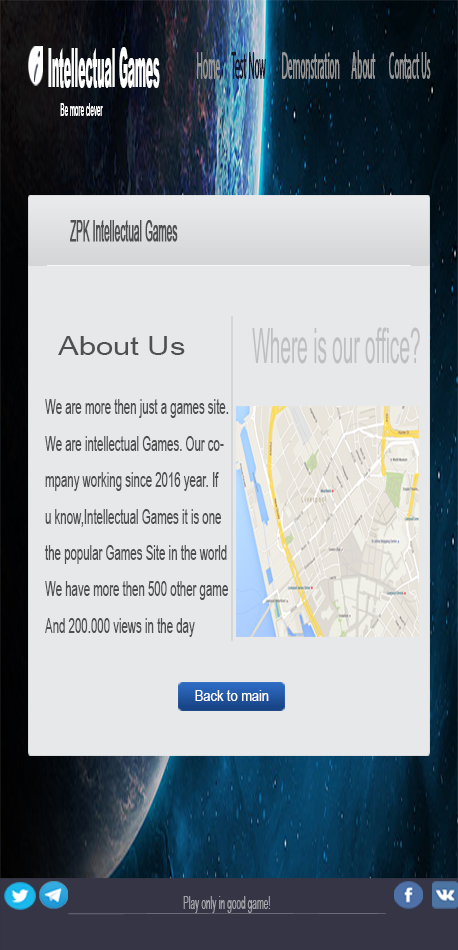
<style>
.page{position:relative;width:458px;height:950px;background:#e7e8ea}
.page>*{position:absolute;margin:0}
.t1{font:58.9px "FreeportPlain";color:#1f1f31;scale:0.39 1}
.t2{font:53.9px "Arial-Black";color:#ffffff;scale:0.2 1}
.t3{font:53.9px "MyriadPro-Regular";color:#ffffff;scale:0.2 1}
.t4{font:39.8px "MyriadPro-Regular";color:#979797;scale:0.23 1}
.t5{font:39.8px "MyriadPro-Regular";color:#161628;scale:0.23 1}
.t6{font:18.2px "ArialMT";color:#ffffff;scale:0.34 1}
.t7{font:29.8px "ArialNarrow";color:#505050;font-weight:bold;scale:0.39 1}
.t8{font:48.7px "ArialNarrow";color:#bfbfbf;scale:0.48 1}
.t9{font:26.1px "ArialNarrow";color:#505050;scale:1.44 1}
.t10{font:21.4px/18.2px "ArialNarrow";color:#505050;scale:0.65 1}
.t11{font:16.2px "ArialNarrow";color:#ffffff;scale:0.96 1}
.t12{font:18.2px "ArialNarrow";color:#a6a6ab;scale:0.55 1}
</style>
<div class="page">
<p class="t1" style="left:34px;top:51px;width:6px;height:31px">i</p>
<p class="t2" style="left:48px;top:47px;width:112px;height:41px"><span class="t3"> </span>Intellectual Games</p>
<p class="t4" style="left:197px;top:50px;width:234px;height:29px">Home     <span class="t5"> Test Now        </span>Demonstration      About       Contact Us</p>
<p class="t6" style="left:60px;top:103px;width:43px;height:13px">Be more clever</p>
<p class="t7" style="left:70px;top:220px;width:108px;height:22px">ZPK Intellectual Games</p>
<p class="t8" style="left:252px;top:327px;width:168px;height:37px">Where is our office?</p>
<p class="t9" style="left:58px;top:336px;width:127px;height:19px">About Us</p>
<p class="t10" style="left:45px;top:399px;width:184px;height:238px">We are more then just a games site.<br><br>We are intellectual Games. Our co-<br><br>mpany working since 2016 year. If <br><br>u know,Intellectual Games it is one<br><br>the popular Games Site in the world<br><br>We have more then 500 other game<br><br>And 200.000 views in the day</p>
<p class="t11" style="left:195px;top:690px;width:74px;height:11px">Back to main</p>
<p class="t12" style="left:183px;top:896px;width:87px;height:17px">Play only in good game!</p>
</div>
